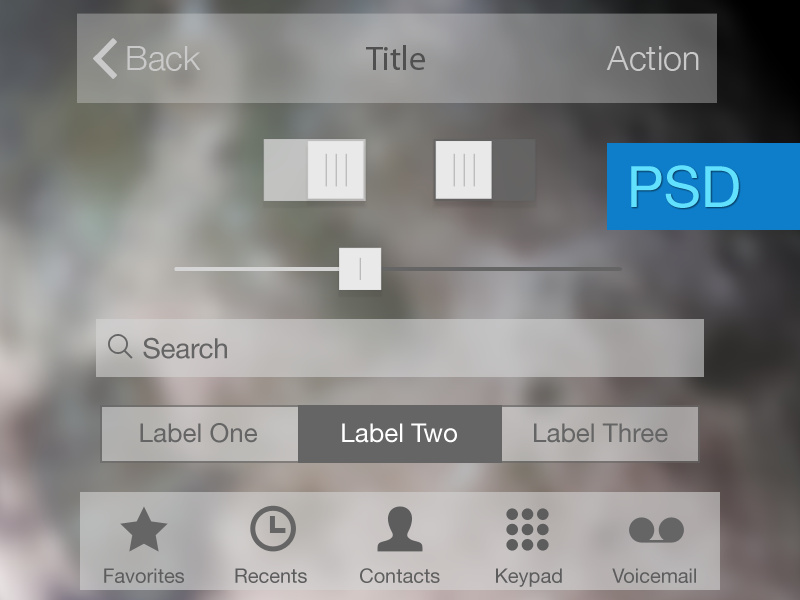
<style>
.page{position:relative;width:800px;height:600px}
.page>*{position:absolute;margin:0}
.t1{font:34px "HelveticaNeue-Light";color:#c9c9c9}
.t2{font:34px "MyriadPro-Regular";color:#505050}
.t3{font:57.2px "HelveticaNeue";color:#61e1fe}
.t4{font:28px "HelveticaNeue";letter-spacing:-0.01em;color:#656565}
.t5{font:26px "HelveticaNeue";color:#656565}
.t6{font:26px "HelveticaNeue";color:#ffffff}
.t7{font:20px "HelveticaNeue";color:#5d5d5e}
.t8{font:20px "HelveticaNeue";color:#606060}
</style>
<div class="page">
<p class="t1" style="left:127px;top:46px;width:74px;height:25px">Back</p>
<p class="t2" style="left:366px;top:45px;width:59px;height:25px">Title</p>
<p class="t1" style="left:606px;top:46px;width:93px;height:25px">Action</p>
<p class="t3" style="left:631px;top:165px;width:108px;height:43px">PSD</p>
<p class="t4" style="left:143px;top:337px;width:84px;height:22px">Search</p>
<p class="t5" style="left:140px;top:423px;width:117px;height:20px">Label One</p>
<p class="t6" style="left:342px;top:423px;width:115px;height:20px">Label Two</p>
<p class="t5" style="left:534px;top:423px;width:134px;height:20px">Label Three</p>
<p class="t7" style="left:104px;top:568px;width:80px;height:15px">Favorites</p>
<p class="t7" style="left:235px;top:568px;width:72px;height:15px">Recents</p>
<p class="t8" style="left:360px;top:568px;width:80px;height:15px">Contacts</p>
<p class="t7" style="left:496px;top:568px;width:66px;height:19px">Keypad</p>
<p class="t7" style="left:612px;top:568px;width:84px;height:15px">Voicemail</p>
</div>
